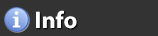
<style>
.page{position:relative;width:158px;height:36px;background:#333333}
.page>*{position:absolute;margin:0}
.t1{font:24px "MyriadPro-Bold";color:#ffffff}
</style>
<div class="page">
<p class="t1" style="left:36px;top:10px;width:41px;height:19px">Info</p>
</div>
